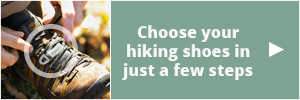
<style>
.page{position:relative;width:300px;height:100px;background:#7fa392}
.page>*{position:absolute;margin:0}
.t1{font:16px "OpenSans-Extrabold";color:#ffffff}
</style>
<div class="page">
<p class="t1" style="left:122px;top:25px;width:131px;height:55px;text-align:center">Choose your hiking shoes in just a few steps</p>
</div>
